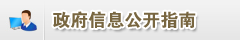
<style>
.page{position:relative;width:240px;height:40px}
.page>*{position:absolute;margin:0}
.t1{font:18px "FZDHTJW--GB1-0";color:#786640}
</style>
<div class="page">
<p class="t1" style="left:53px;top:11px;width:143px;height:18px">政府信息公开指南</p>
</div>
